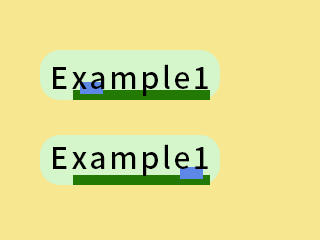
<style>
.page{position:relative;width:320px;height:240px;background:#f7e790}
.page>*{position:absolute;margin:0}
.t1{font:30px "SourceHanSans-Medium";letter-spacing:0.1em;color:#000000}
</style>
<div class="page">
<p class="t1" style="left:53px;top:64px;width:155px;height:32px">Example1</p>
<p class="t1" style="left:53px;top:144px;width:155px;height:32px">Example1</p>
</div>
